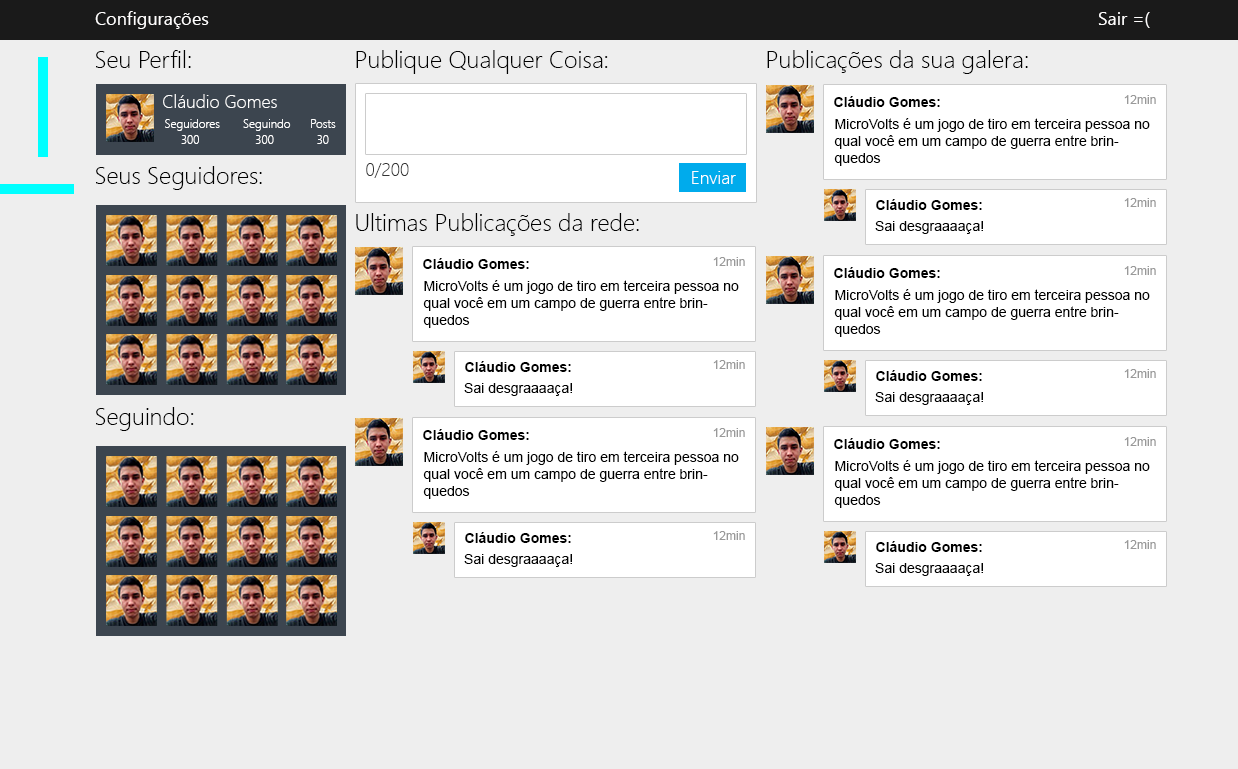
<style>
.page{position:relative;width:1238px;height:769px;background:#eeeeee}
.page>*{position:absolute;margin:0}
.t1{font:18px "SegoeUI";color:#fffefe}
.t2{font:24px "SegoeUI-Light";color:#000000}
.t3{font:18px "SegoeUI-Light";color:#fefefe}
.t4{font:14px "Arial-BoldMT";color:#000000}
.t5{font:12px "ArialMT";color:#999999}
.t6{font:12px "SegoeUI-Light";color:#fefefe}
.t7{font:14px "ArialMT";color:#000000}
.t8{font:18px "SegoeUI-Light";color:#333333}
</style>
<div class="page">
<p class="t1" style="left:95px;top:11px;width:114px;height:18px">Configurações</p>
<p class="t1" style="left:1098px;top:12px;width:52px;height:16px">Sair =(</p>
<p class="t2" style="left:96px;top:50px;width:95px;height:18px">Seu Perfil:</p>
<p class="t2" style="left:356px;top:50px;width:252px;height:24px">Publique Qualquer Coisa:</p>
<p class="t2" style="left:767px;top:50px;width:261px;height:24px">Publicações da sua galera:</p>
<p class="t3" style="left:163px;top:94px;width:114px;height:14px">Cláudio Gomes</p>
<p class="t4" style="left:834px;top:96px;width:106px;height:11px">Cláudio Gomes:</p>
<p class="t5" style="left:1124px;top:95px;width:32px;height:9px">12min</p>
<p class="t6" style="left:165px;top:119px;width:171px;height:12px">Seguidores       Seguindo      Posts</p>
<p class="t7" style="left:834px;top:118px;width:316px;height:48px">MicroVolts é um jogo de tiro em terceira pessoa no qual você em um campo de guerra entre brinquedos</p>
<p class="t6" style="left:181px;top:135px;width:148px;height:9px">300                 300             30</p>
<p class="t2" style="left:96px;top:166px;width:166px;height:24px">Seus Seguidores:</p>
<p class="t8" style="left:366px;top:163px;width:43px;height:15px">0/200</p>
<p class="t3" style="left:692px;top:171px;width:44px;height:13px">Enviar</p>
<p class="t5" style="left:1124px;top:198px;width:32px;height:9px">12min</p>
<p class="t4" style="left:876px;top:199px;width:106px;height:11px">Cláudio Gomes:</p>
<p class="t2" style="left:356px;top:213px;width:283px;height:23px">Ultimas Publicações da rede:</p>
<p class="t7" style="left:875px;top:221px;width:108px;height:13px">Sai desgraaaaça!</p>
<p class="t2" style="left:96px;top:407px;width:98px;height:24px">Seguindo:</p>
</div>
